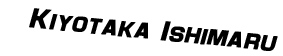
<style>
.page{position:relative;width:283px;height:56px;background:#ffffff}
.page>*{position:absolute;margin:0}
.t1{font:28px "Maximus";color:#000000;font-weight:bold;font-style:italic}
</style>
<div class="page">
<p class="t1" style="left:29px;top:8px;width:249px;height:43px;rotate:6deg">Kiyotaka Ishimaru</p>
</div>
